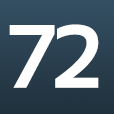
<style>
.page{position:relative;width:114px;height:114px}
.page>*{position:absolute;margin:0}
.t1{font:90px "Sansation-Bold";letter-spacing:-0.067em;color:#ffffff;text-transform:uppercase}
</style>
<div class="page">
<p class="t1" style="left:9px;top:24px;width:90px;height:64px">72</p>
</div>
